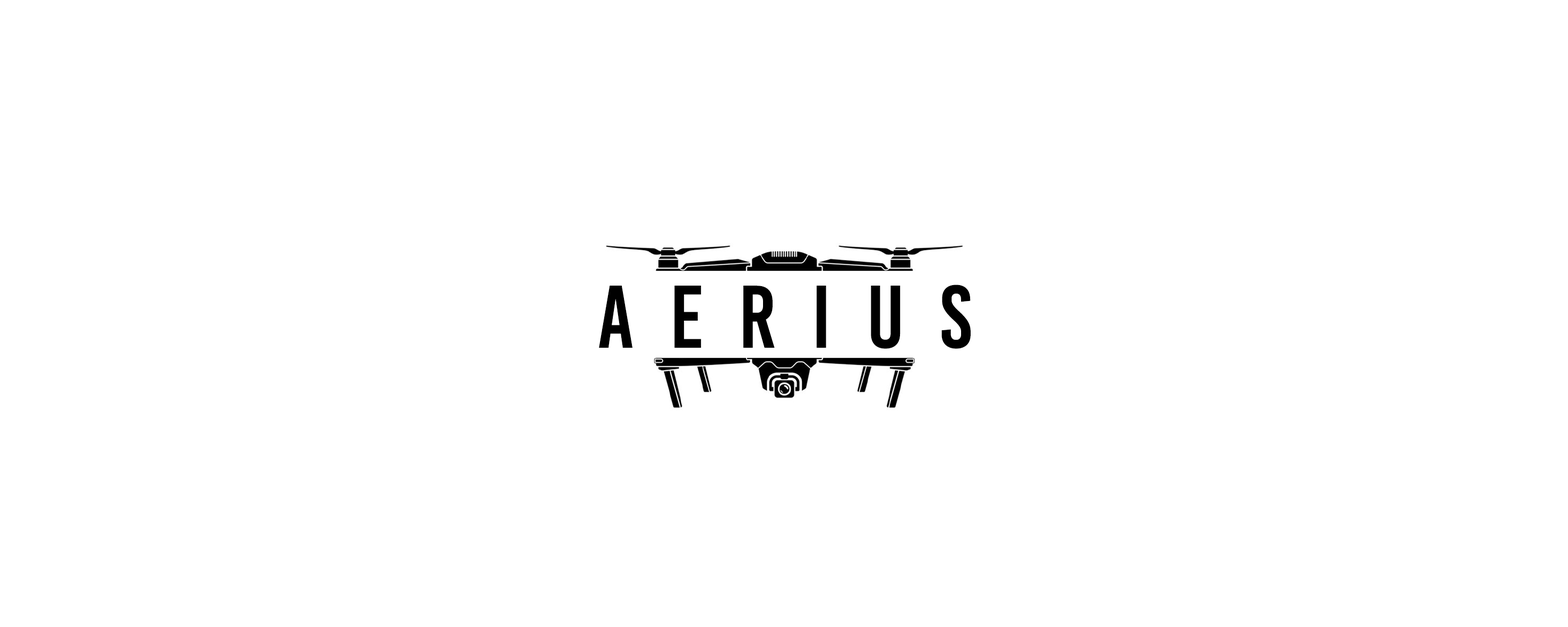
<style>
.page{position:relative;width:1568px;height:627px;background:#ffffff}
.page>*{position:absolute;margin:0}
.t1{font:88.5px "BebasKai";letter-spacing:0.4em;color:#000000}
</style>
<div class="page">
<p class="t1" style="left:599px;top:285px;width:372px;height:64px">AERIUS</p>
</div>
